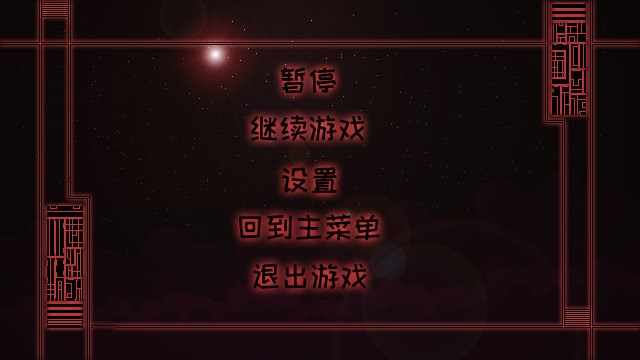
<style>
.page{position:relative;width:640px;height:360px}
.page>*{position:absolute;margin:0}
.t1{font:30px "HappyZcool-2016";letter-spacing:-0.02em;color:#000000}
</style>
<div class="page">
<p class="t1" style="left:251px;top:115px;width:114px;height:27px">继续游戏</p>
<p class="t1" style="left:282px;top:167px;width:55px;height:27px">设置</p>
<p class="t1" style="left:238px;top:214px;width:142px;height:27px">回到主菜单</p>
<p class="t1" style="left:253px;top:263px;width:114px;height:26px">退出游戏</p>
</div>
